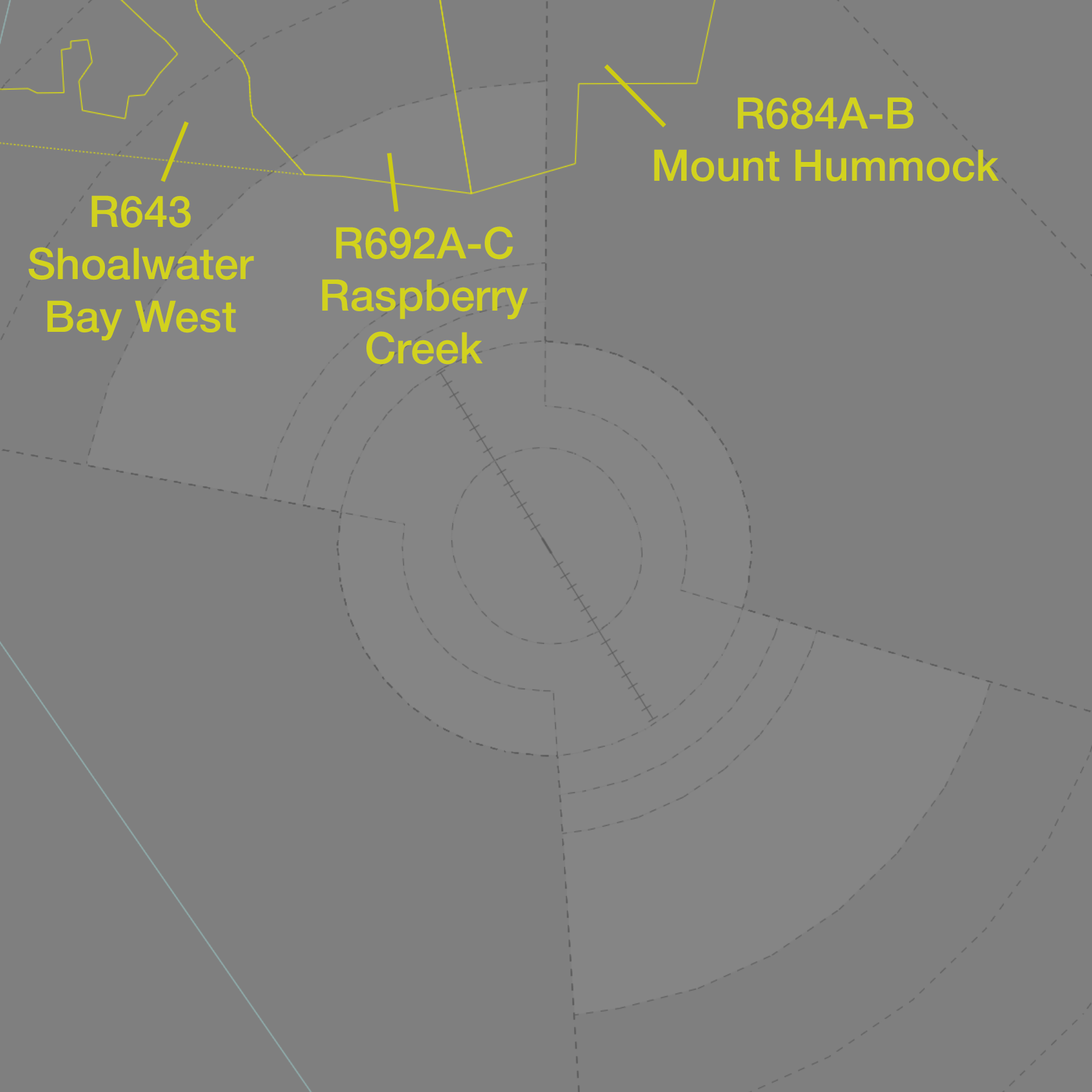
<style>
.page{position:relative;width:1092px;height:1092px;background:#7f7f7f}
.page>*{position:absolute;margin:0}
.t1{font:43.7px "HelveticaNeue-Medium";color:#d2d21e}
</style>
<div class="page">
<p class="t1" style="left:654px;top:97px;width:345px;height:85px;text-align:center">R684A-B<br>Mount Hummock</p>
<p class="t1" style="left:29px;top:195px;width:225px;height:146px;text-align:center">R643<br>Shoalwater<br>Bay West</p>
<p class="t1" style="left:322px;top:226px;width:206px;height:139px;text-align:center">R692A-C<br>Raspberry<br>Creek</p>
</div>
